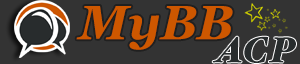
<style>
.page{position:relative;width:300px;height:64px;background:#333333}
.page>*{position:absolute;margin:0}
.t1{font:48px "Georgia-BoldItalic";color:#cd5700}
</style>
<div class="page">
<p class="t1" style="left:76px;top:6px;width:157px;height:44px">MyBB</p>
</div>
